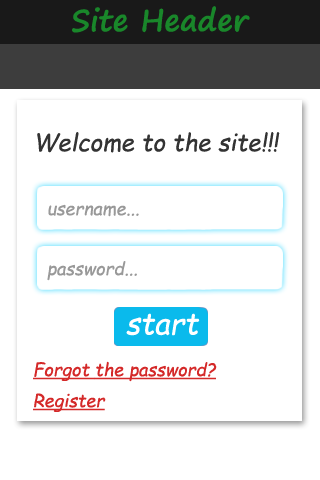
<style>
.page{position:relative;width:320px;height:480px;background:#ffffff}
.page>*{position:absolute;margin:0}
.t1{font:30px "SegoePrint-Bold";color:#19872a}
.t2{font:24px "ComicSansMS-Italic";color:#333333}
.t3{font:18px "ComicSansMS-Italic";color:#999999}
.t4{font:18px "ComicSansMS-Italic";color:#d42929;text-decoration:underline}
</style>
<div class="page">
<p class="t1" style="left:72px;top:6px;width:178px;height:27px">Site Header</p>
<p class="t2" style="left:37px;top:132px;width:243px;height:21px">Welcome to the site!!!</p>
<p class="t3" style="left:48px;top:204px;width:91px;height:13px">username...</p>
<p class="t3" style="left:47px;top:261px;width:90px;height:20px">password...</p>
<p class="t4" style="left:33px;top:361px;width:184px;height:21px">Forgot the password?</p>
<p class="t4" style="left:33px;top:393px;width:73px;height:19px">Register</p>
</div>
